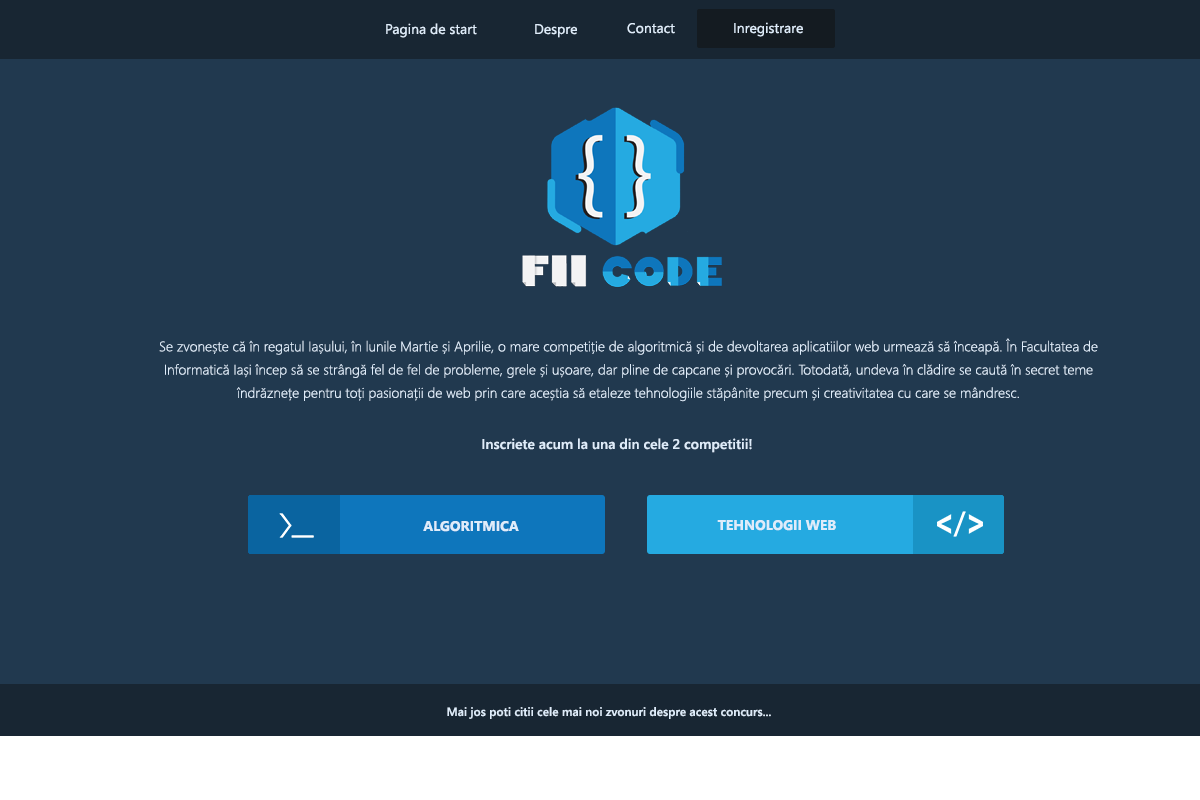
<style>
.page{position:relative;width:1200px;height:800px;background:#21394f}
.page>*{position:absolute;margin:0}
.t1{font:14px "SegoeUI";color:#deecfa}
.t2{font:14px/23.2px "SegoeUI-Light";color:#deecfa}
.t3{font:14px "SegoeUI-Semibold";color:#deecfa}
.t4{font:14px "SegoeUI-Bold";color:#deecfa}
.t5{font:12px "SegoeUI-Semibold";color:#deecfa}
</style>
<div class="page">
<p class="t1" style="left:386px;top:23px;width:91px;height:15px">Pagina de start</p>
<p class="t1" style="left:535px;top:24px;width:42px;height:14px">Despre</p>
<p class="t1" style="left:627px;top:23px;width:48px;height:11px">Contact</p>
<p class="t1" style="left:734px;top:22px;width:69px;height:15px">Inregistrare</p>
<p class="t2" style="left:159px;top:338px;width:939px;height:64px;text-align:center">Se zvonește că în regatul Iașului, în lunile Martie și Aprilie, o mare competiție de algoritmică și de devoltarea aplicatiilor web urmează să înceapă. În Facultatea de Informatică Iași încep să se strângă fel de fel de probleme, grele și ușoare, dar pline de capcane și provocări. Totodată, undeva în clădire se caută în secret teme îndrăznețe pentru toți pasionații de web prin care aceștia să etaleze tehnologiile stăpânite precum și creativitatea cu care se mândresc.</p>
<p class="t3" style="left:482px;top:438px;width:270px;height:15px">Inscriete acum la una din cele 2 competitii!</p>
<p class="t4" style="left:423px;top:521px;width:96px;height:11px">ALGORITMICA</p>
<p class="t4" style="left:717px;top:520px;width:119px;height:11px">TEHNOLOGII WEB</p>
<p class="t5" style="left:447px;top:707px;width:324px;height:12px">Mai jos poti citii cele mai noi zvonuri despre acest concurs...</p>
</div>
